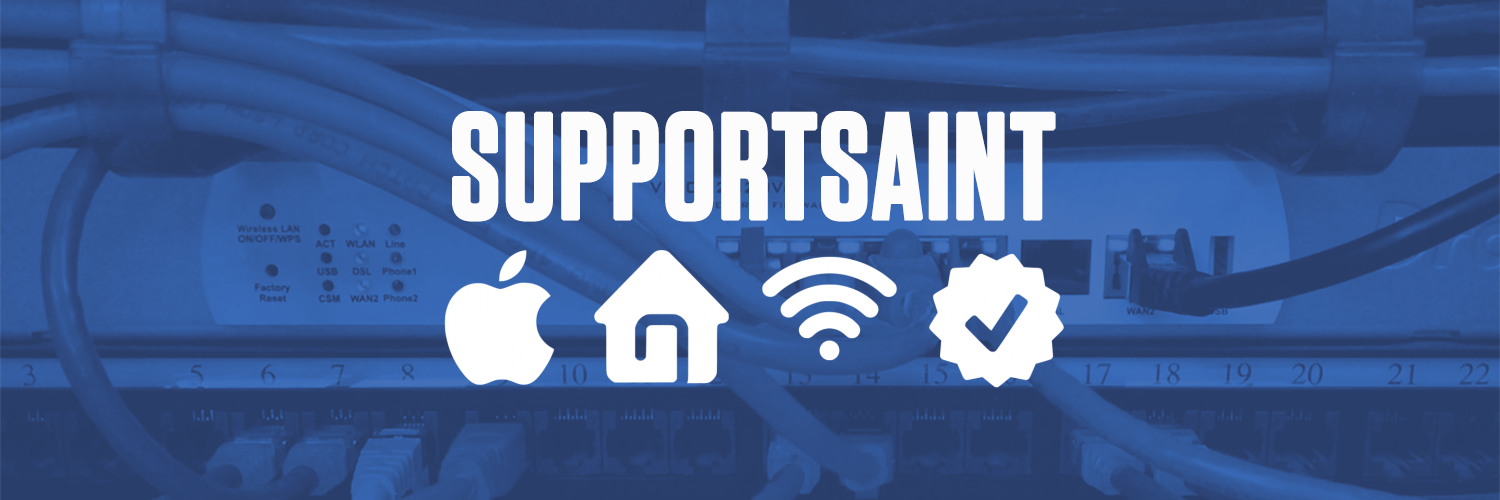
<style>
.page{position:relative;width:1500px;height:500px}
.page>*{position:absolute;margin:0}
.t1{font:149.5px "Tungsten-Semibold";color:#fcfcfc;font-weight:bold;scale:0.92 1}
</style>
<div class="page">
<p class="t1" style="left:452px;top:111px;width:604px;height:111px">SUPPORTSAINT</p>
</div>
